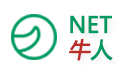
<style>
.page{position:relative;width:121px;height:75px;background:#ffffff}
.page>*{position:absolute;margin:0}
.t1{font:21.9px/24.7px "MicrosoftYaHei";color:#019961;font-weight:bold}
.t2{font:21.9px/24.7px "MicrosoftYaHei";color:#b92c28;font-weight:bold;font-style:italic}
</style>
<div class="page">
<p class="t1" style="left:69px;top:15px;width:44px;height:46px;text-align:center">NET<br><span class="t2">牛</span>人</p>
</div>
